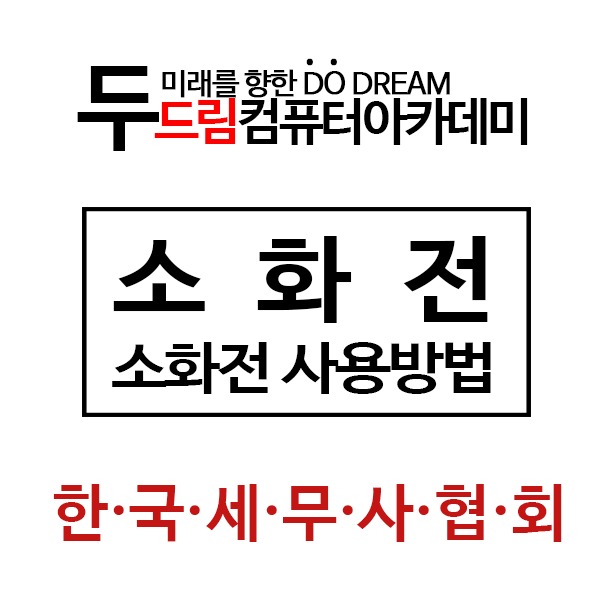
<style>
.page{position:relative;width:600px;height:600px;background:#ffffff}
.page>*{position:absolute;margin:0}
.t1{font:44.3px "NanumBarunGothic";letter-spacing:0.13em;color:#000000;font-weight:bold;scale:0.84 1}
.t2{font:44.3px "NanumBarunGothic";letter-spacing:0.15em;color:#000000;font-weight:bold;scale:0.84 1}
.t3{font:51.4px "NanumBarunGothicBold";letter-spacing:-0.075em;color:#000000}
.t4{font:95.7px "NanumBarunGothicBold";letter-spacing:-0.075em;color:#000000}
.t5{font:51.4px "NanumBarunGothicBold";letter-spacing:-0.075em;color:#ff0000}
.t6{font:30.1px "NanumBarunGothic";letter-spacing:-0.05em;color:#000000;font-weight:bold}
.t7{font:55.5px/76.2px "NanumBarunGothicBold";letter-spacing:-0.05em;color:#000000;scale:1.14 1}
.t8{font:93.6px "NanumBarunGothicBold";letter-spacing:0.47em;color:#000000;scale:1.14 1}
.t9{font:93.6px "NanumBarunGothicBold";letter-spacing:0.51em;color:#000000;scale:1.14 1}
.t10{font:55.5px/74.6px "NanumBarunGothicBold";letter-spacing:-0.05em;color:#000000;scale:1.14 1}
.t11{font:62.2px "NanumBarunGothicBold";letter-spacing:-0.05em;color:#c31514}
</style>
<div class="page">
<p class="t1" style="left:306px;top:58px;width:31px;height:8px">·<span class="t2">·</span></p>
<p class="t3" style="left:77px;top:66px;width:451px;height:85px"><span class="t4">두</span><span class="t5">드림</span>컴퓨터아카데미</p>
<p class="t6" style="left:162px;top:69px;width:288px;height:29px">미래를 향한 DO DREAM</p>
<p class="t7" style="left:112px;top:236px;width:379px;height:158px;text-align:center"><span class="t8">소화</span><span class="t9">전<br></span>소화전 사용방<span class="t10">법</span></p>
<p class="t11" style="left:53px;top:484px;width:509px;height:58px">한·국·세·무·사·협·회</p>
</div>
